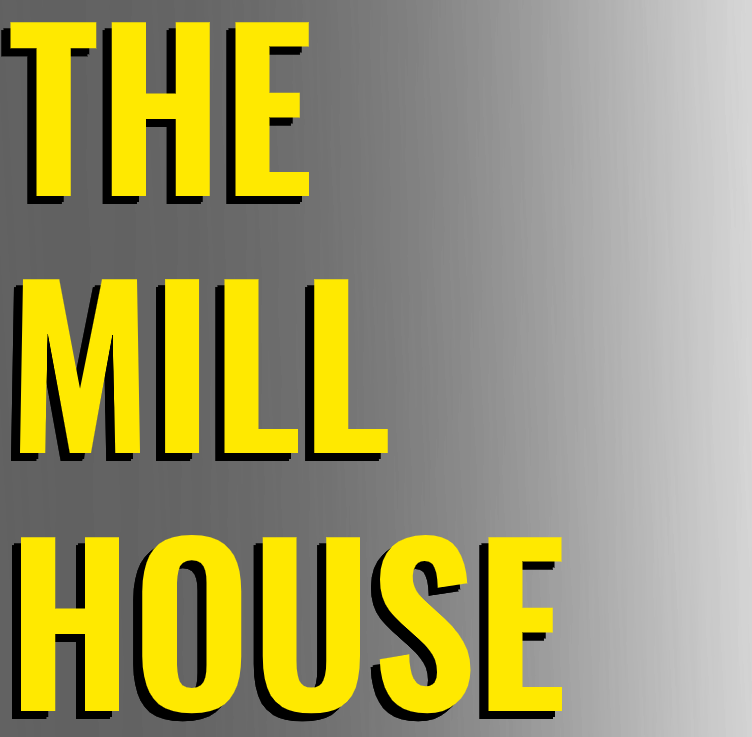
<style>
.page{position:relative;width:752px;height:737px;background:#ffe900}
.page>*{position:absolute;margin:0}
.t1{font:214.6px "Oswald-SemiBold";color:#ffe900;scale:0.97 1}
</style>
<div class="page">
<p class="t1" style="left:10px;top:22px;width:553px;height:692px">THE<br>MILL<br>HOUSE</p>
</div>
